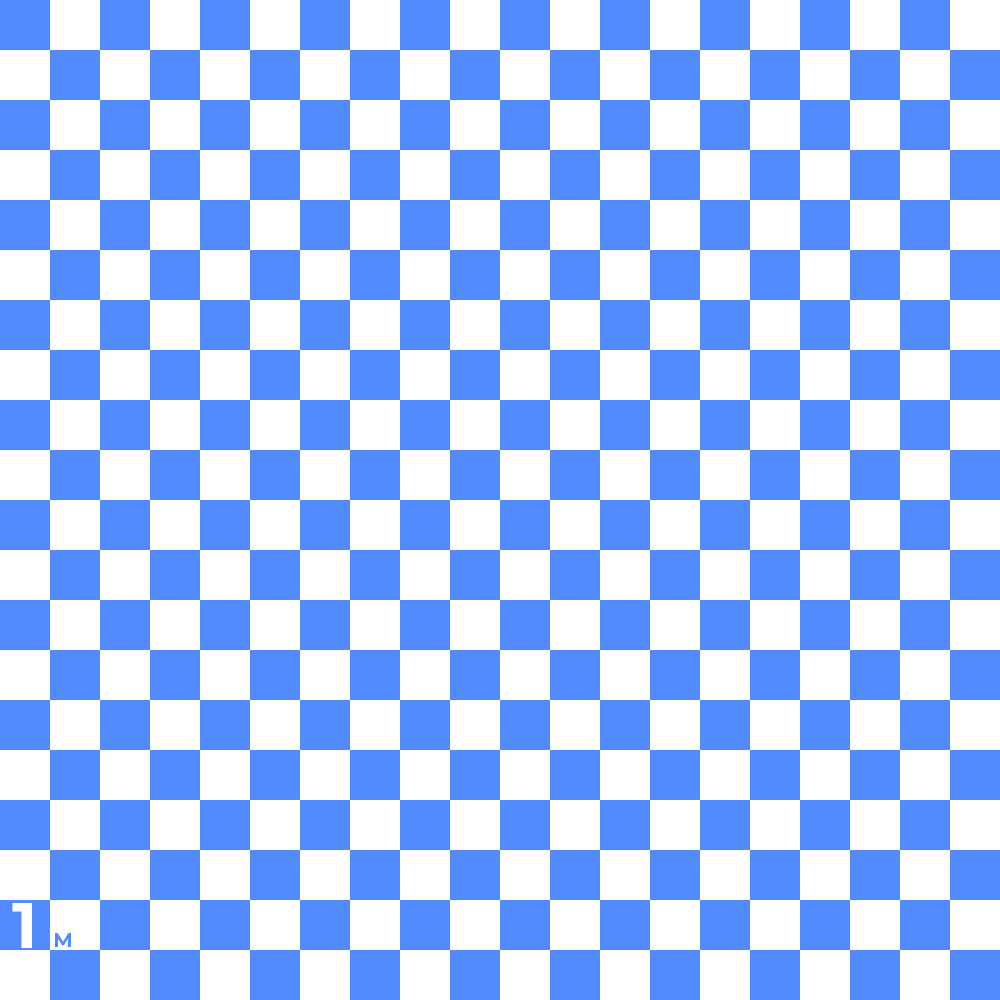
<style>
.page{position:relative;width:1000px;height:1000px;background:#ffffff}
.page>*{position:absolute;margin:0}
.t1{font:65px "Montserrat-Bold";letter-spacing:0.075em;color:#ffffff;text-transform:uppercase}
.t2{font:20px "Montserrat-Bold";letter-spacing:0.075em;color:#538bff;text-transform:uppercase}
</style>
<div class="page">
<p class="t1" style="left:12px;top:903px;width:20px;height:45px">1</p>
<p class="t2" style="left:55px;top:933px;width:16px;height:14px">m</p>
</div>
